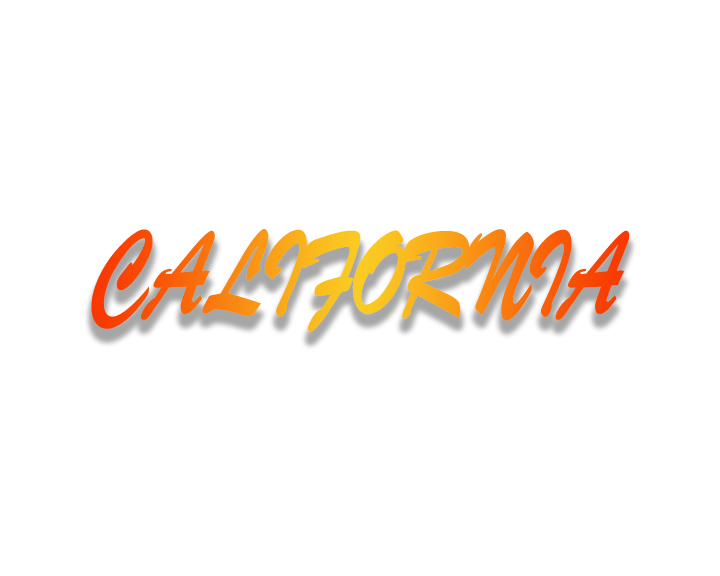
<style>
.page{position:relative;width:720px;height:576px;background:#ffffff}
.page>*{position:absolute;margin:0}
.t1{font:120px "BrushScriptStd";letter-spacing:-0.05em;text-transform:uppercase;scale:0.69 1}
</style>
<div class="page">
<p class="t1" style="left:91px;top:229px;width:539px;height:103px">California</p>
</div>
